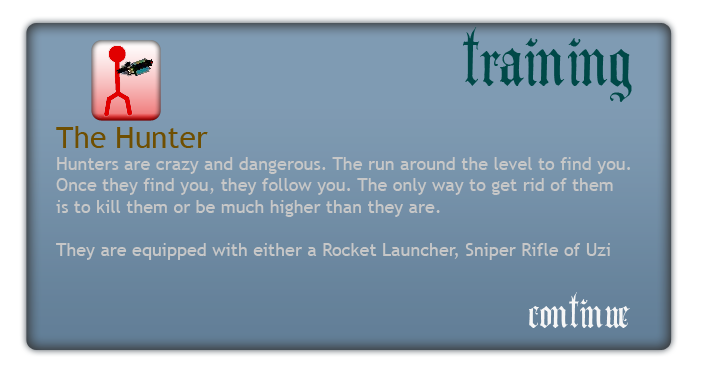
<style>
.page{position:relative;width:707px;height:377px}
.page>*{position:absolute;margin:0}
.t1{font:100px "AngloText";color:#004948}
.t2{font:18px "TrebuchetMS";color:#c7c7c7}
.t3{font:30px "TrebuchetMS";color:#6f4f01}
.t4{font:60px "AngloText";color:#f6f6f6}
</style>
<div class="page">
<p class="t1" style="left:463px;top:27px;width:169px;height:75px">training</p>
<p class="t2" style="left:56px;top:126px;width:574px;height:134px"><span class="t3">The Hunter<br></span>Hunters are crazy and dangerous. The run around the level to find you.<br>Once they find you, they follow you. The only way to get rid of them<br>is to kill them or be much higher than they are.<br><br>They are equipped with either a Rocket Launcher, Sniper Rifle of Uzi</p>
<p class="t4" style="left:529px;top:292px;width:101px;height:36px">continue</p>
</div>
